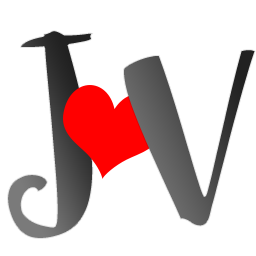
<style>
.page{position:relative;width:256px;height:256px;background:#ffffff}
.page>*{position:absolute;margin:0}
.t1{font:260px "Sophia";letter-spacing:-0.01em;color:#ffffff}
</style>
<div class="page">
<p class="t1" style="left:7px;top:30px;width:87px;height:209px">J</p>
<p class="t1" style="left:123px;top:49px;width:133px;height:178px">V</p>
</div>
